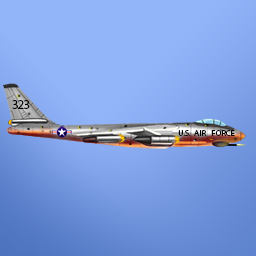
<style>
.page{position:relative;width:256px;height:256px;background:#92b4f9}
.page>*{position:absolute;margin:0}
.t1{font:13.5px "MyriadPro-Regular";letter-spacing:-0.08em;color:#000000}
.t2{font:8.4px "MyriadPro-Regular";color:#000000}
</style>
<div class="page">
<p class="t1" style="left:12px;top:100px;width:18px;height:9px">323</p>
<p class="t2" style="left:178px;top:130px;width:57px;height:6px">U.S.  AIR   FORCE</p>
</div>
